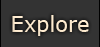
<style>
.page{position:relative;width:100px;height:47px;background:#333333}
.page>*{position:absolute;margin:0}
.t1{font:21px "Verdana";color:#ffecd0}
</style>
<div class="page">
<p class="t1" style="left:12px;top:15px;width:77px;height:21px">Explore</p>
</div>
